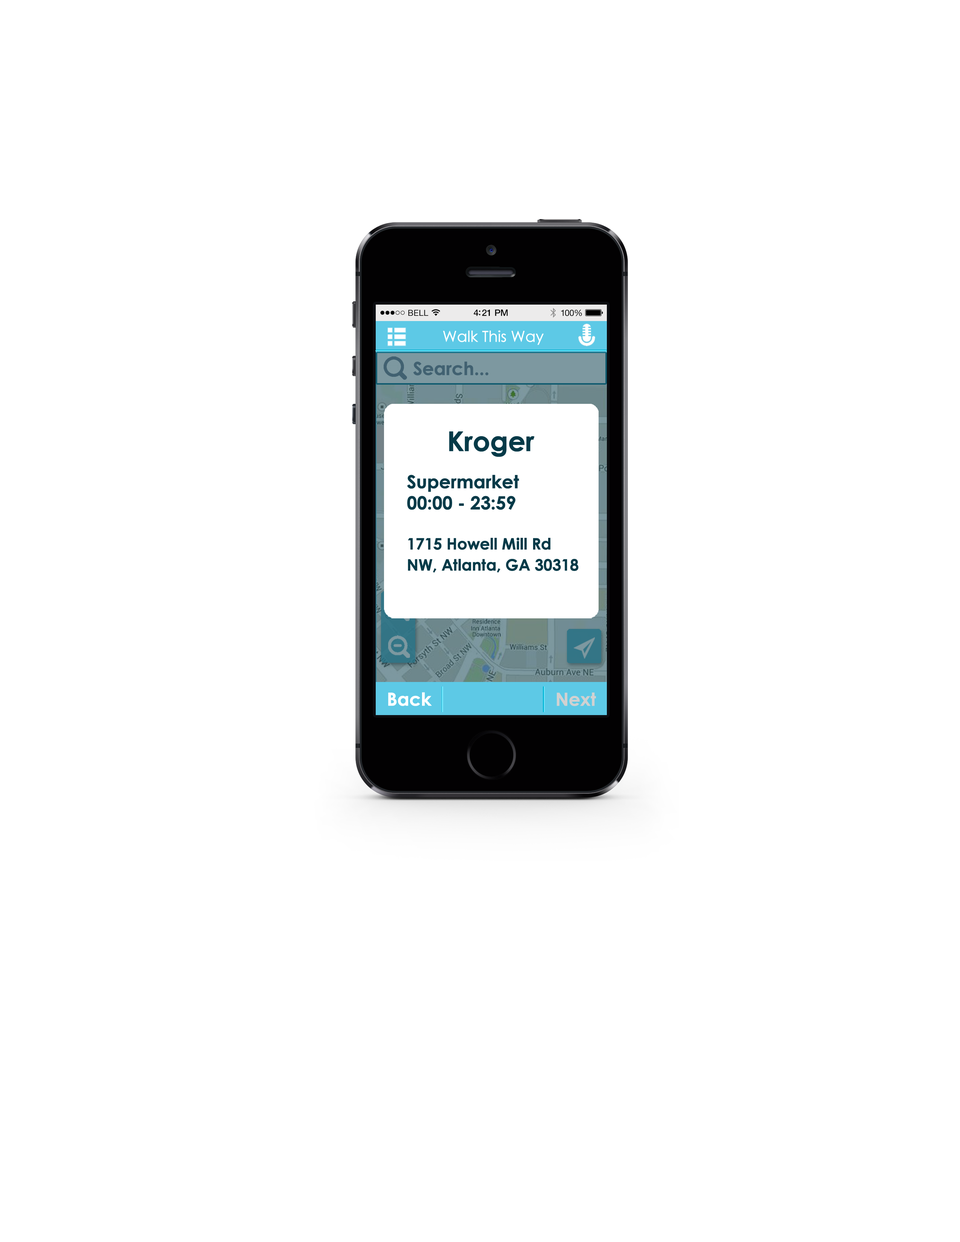
<style>
.page{position:relative;width:960px;height:1242px;background:#ffffff}
.page>*{position:absolute;margin:0}
.t1{font:15px "CenturyGothic";letter-spacing:-0.025em;color:#ffffff;font-weight:bold}
.t2{font:18.1px "CenturyGothic-Bold";letter-spacing:-0.025em;color:#416171;font-weight:bold}
.t3{font:27.1px "CenturyGothic-Bold";letter-spacing:-0.025em;color:#053a48;font-weight:bold}
.t4{font:15.7px/21.1px "CenturyGothic-Bold";letter-spacing:-0.025em;color:#053a48;font-weight:bold}
.t5{font:18.1px/21.1px "CenturyGothic-Bold";letter-spacing:-0.025em;color:#053a48;font-weight:bold}
.t6{font:18.1px "CenturyGothic-Bold";letter-spacing:-0.025em;color:#ffffff;font-weight:bold}
.t7{font:18.1px "CenturyGothic-Bold";letter-spacing:-0.025em;color:#d1d1d1;font-weight:bold}
</style>
<div class="page">
<p class="t1" style="left:443px;top:330px;width:101px;height:15px">Walk This Way</p>
<p class="t2" style="left:413px;top:361px;width:76px;height:15px">Search...</p>
<p class="t3" style="left:449px;top:431px;width:86px;height:26px">Kroger</p>
<p class="t4" style="left:407px;top:475px;width:172px;height:98px"><span class="t5">Supermarket<br>00:00 - 23:59<br><br></span>1715 Howell Mill Rd NW, Atlanta, GA 30318</p>
<p class="t6" style="left:388px;top:692px;width:44px;height:14px">Back</p>
<p class="t7" style="left:557px;top:693px;width:39px;height:13px">Next</p>
</div>
